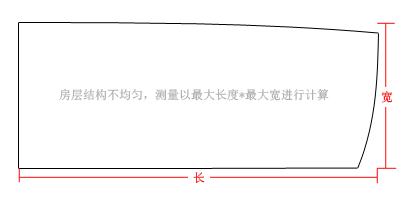
<style>
.page{position:relative;width:400px;height:200px;background:#ffffff}
.page>*{position:absolute;margin:0}
.t1{font:12px "SimSun";color:#aaaaaa}
.t2{font:12px "SimSun"}
</style>
<div class="page">
<p class="t1" style="left:59px;top:89px;width:270px;height:12px">房层结构不均匀，测量以最大长度*最大宽进行计算</p>
<p class="t2" style="left:382px;top:91px;width:10px;height:12px">宽</p>
<p class="t2" style="left:193px;top:172px;width:12px;height:11px">长</p>
</div>
